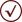
<style>
.page{position:relative;width:22px;height:22px;background:#ffffff}
.page>*{position:absolute;margin:0}
.t1{font:17.1px "AppleSymbols";letter-spacing:0.2em;color:#610f0f;font-weight:bold}
</style>
<div class="page">
<p class="t1" style="left:5px;top:5px;width:12px;height:12px">√</p>
</div>
